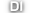
<style>
.page{position:relative;width:34px;height:13px;background:#ffffff}
.page>*{position:absolute;margin:0}
.t1{font:13.9px "K2D-ExtraBold";color:#ffffff}
</style>
<div class="page">
<p class="t1" style="left:10px;top:1px;width:13px;height:10px">DI</p>
</div>
